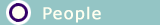
<style>
.page{position:relative;width:160px;height:25px;background:#94c5c5}
.page>*{position:absolute;margin:0}
.t1{font:16px "Verdana";letter-spacing:0.055em;color:#fffff0;font-weight:bold}
</style>
<div class="page">
<p class="t1" style="left:43px;top:6px;width:58px;height:17px">People</p>
</div>
